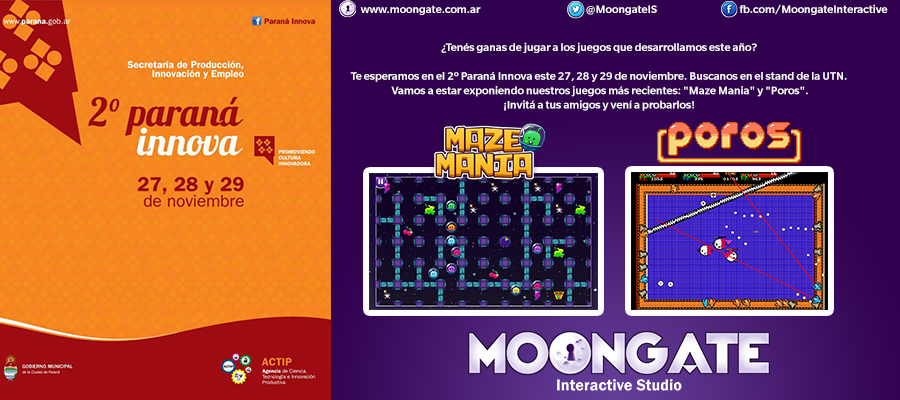
<style>
.page{position:relative;width:900px;height:400px}
.page>*{position:absolute;margin:0}
.t1{font:12px "SlatePro-Medium";color:#ffffff}
</style>
<div class="page">
<p class="t1" style="left:360px;top:5px;width:121px;height:10px">www.moongate.com.ar</p>
<p class="t1" style="left:586px;top:5px;width:71px;height:10px">@MoongateIS</p>
<p class="t1" style="left:739px;top:4px;width:149px;height:11px">fb.com/MoongateInteractive</p>
<p class="t1" style="left:350px;top:42px;width:497px;height:69px;text-align:center">¿Tenés ganas de jugar a los juegos que desarrollamos este año?<br><br>Te esperamos en el 2º Paraná Innova este 27, 28 y 29 de noviembre. Buscanos en el stand de la UTN.<br> Vamos a estar exponiendo nuestros juegos más recientes: "Maze Mania" y "Poros".<br>¡Invitá a tus amigos y vení a probarlos!</p>
</div>
